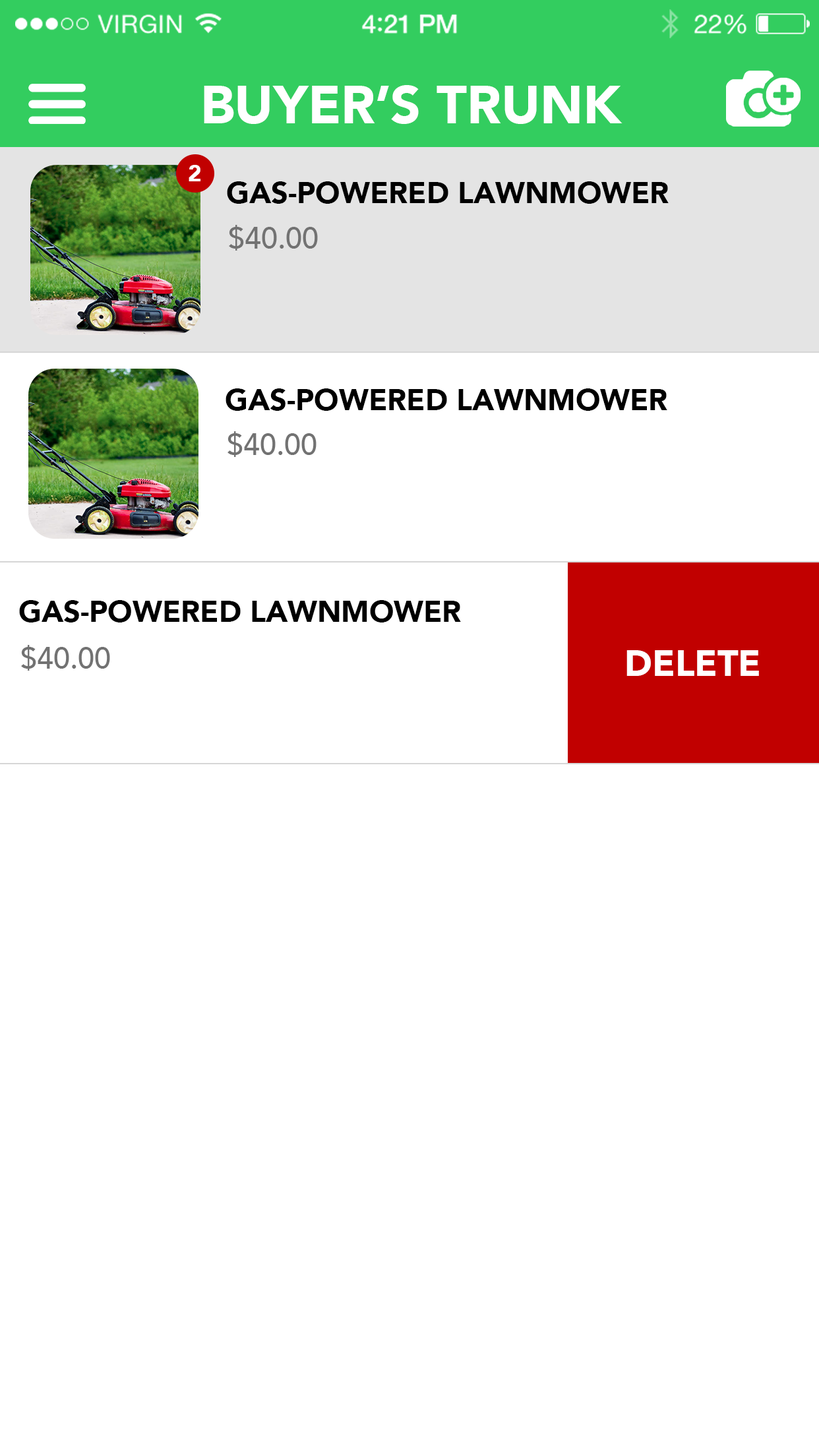
<style>
.page{position:relative;width:819px;height:1456px;background:#ffffff}
.page>*{position:absolute;margin:0}
.t1{font:52.8px "Avenir-Black";color:#ffffff}
.t2{font:23.1px "Avenir-Black";color:#ffffff}
.t3{font:29.7px "Avenir-Black";color:#000000}
.t4{font:29.7px "Avenir-Medium";color:#727272}
.t5{font:36.3px "Avenir-Black";color:#ffffff}
</style>
<div class="page">
<p class="t1" style="left:204px;top:85px;width:418px;height:39px">BUYER’S TRUNK</p>
<p class="t2" style="left:189px;top:165px;width:11px;height:16px">2</p>
<p class="t3" style="left:227px;top:181px;width:442px;height:23px">GAS-POWERED LAWNMOWER</p>
<p class="t4" style="left:229px;top:225px;width:89px;height:26px">$40.00</p>
<p class="t3" style="left:226px;top:388px;width:441px;height:23px">GAS-POWERED LAWNMOWER</p>
<p class="t4" style="left:227px;top:431px;width:90px;height:26px">$40.00</p>
<p class="t3" style="left:19px;top:600px;width:442px;height:22px">GAS-POWERED LAWNMOWER</p>
<p class="t4" style="left:21px;top:645px;width:89px;height:26px">$40.00</p>
<p class="t5" style="left:626px;top:650px;width:133px;height:26px">DELETE</p>
</div>
